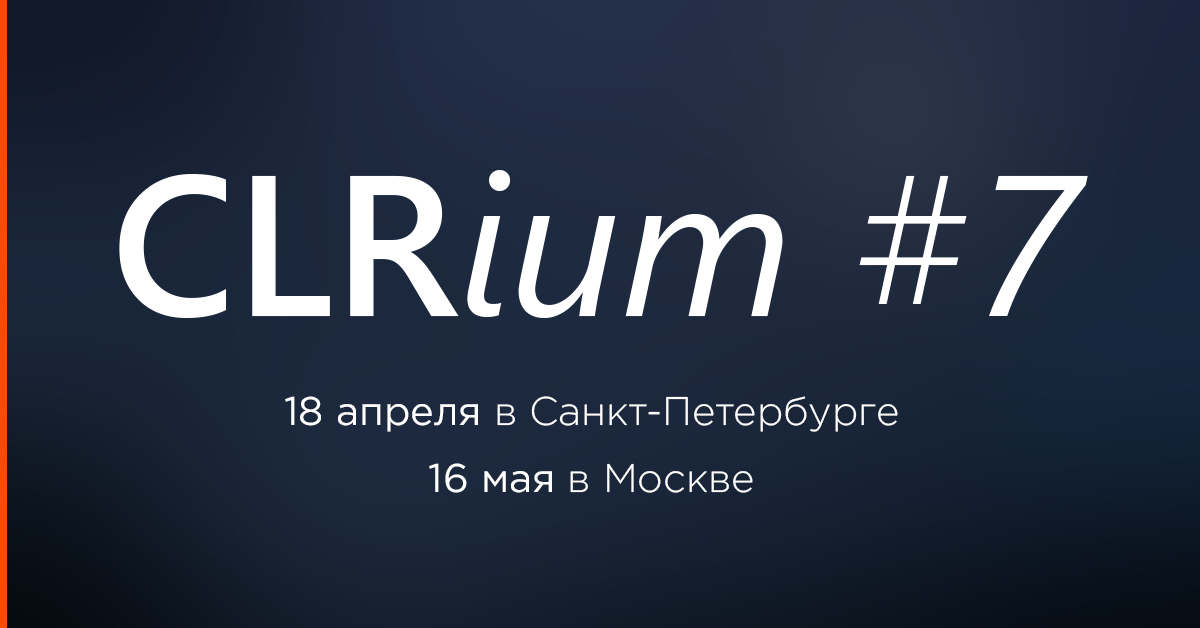
<style>
.page{position:relative;width:1200px;height:628px}
.page>*{position:absolute;margin:0}
.t1{font:40px/66.7px "GothamPro-Light";color:#ffffff}
.t2{font:40px/66.7px "GothamPro";color:#ffffff}
</style>
<div class="page">
<p class="t1" style="left:285px;top:396px;width:613px;height:97px;text-align:center"><span class="t2">18 апреля</span> в Санкт-Петербурге<br><span class="t2">16 мая</span> в Москве</p>
</div>
